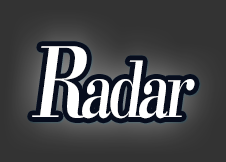
<style>
.page{position:relative;width:226px;height:162px;background:#333333}
.page>*{position:absolute;margin:0}
.t1{font:76.8px "KochoStd-Heavy";letter-spacing:-0.08em;color:#ffffff;font-style:italic;scale:0.75 1}
.t2{font:96px "KochoStd-Heavy";letter-spacing:-0.08em;color:#ffffff;font-style:italic;scale:0.75 1}
</style>
<div class="page">
<p class="t1" style="left:32px;top:46px;width:163px;height:73px"><span class="t2">R</span>adar</p>
</div>
